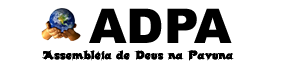
<style>
.page{position:relative;width:300px;height:78px;background:#ffffff}
.page>*{position:absolute;margin:0}
.t1{font:48px "Arial-Black";color:#000000}
.t2{font:12px "Candles-Regular";color:#000000}
</style>
<div class="page">
<p class="t1" style="left:89px;top:8px;width:143px;height:35px">ADPA</p>
<p class="t2" style="left:42px;top:50px;width:192px;height:11px">Assembléia de Deus na Pavuna</p>
</div>
